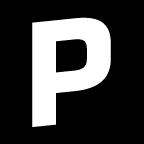
<style>
.page{position:relative;width:144px;height:144px;background:#000000}
.page>*{position:absolute;margin:0}
.t1{font:156.4px "KlavikaBold-Bold";color:#ffffff}
</style>
<div class="page">
<p class="t1" style="left:32px;top:17px;width:79px;height:110px;rotate:-6deg">P</p>
</div>
